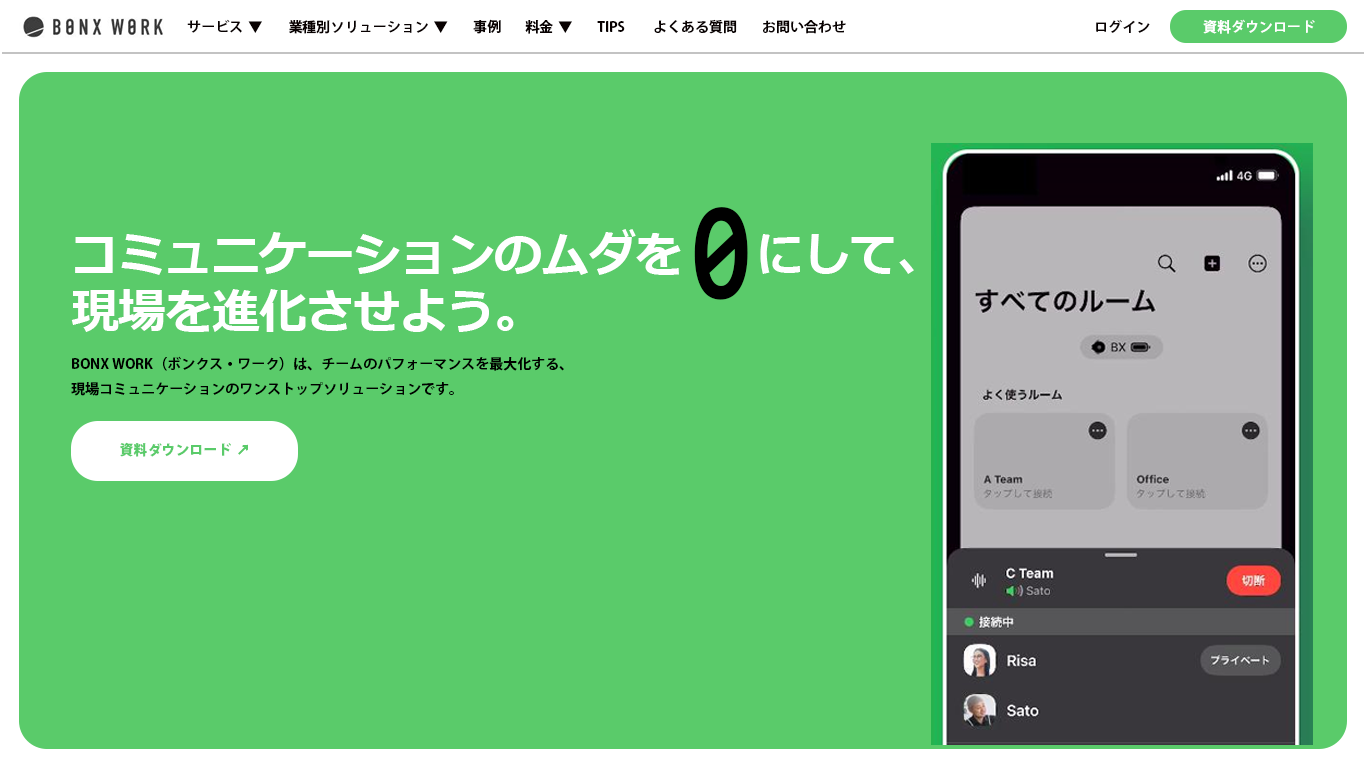
<style>
.page{position:relative;width:1366px;height:768px;background:#5acb6a}
.page>*{position:absolute;margin:0}
.t1{font:14px "KozGoPr6N-Bold";letter-spacing:-0.015em;color:#080101}
.t2{font:14px "KozGoPr6N-Bold";letter-spacing:-0.015em;color:#ffffff}
.t3{font:140px "Consolas-Bold";letter-spacing:-0.015em;color:#000000;scale:0.76 1}
.t4{font:48px "Meiryo-Bold";letter-spacing:-0.015em;color:#ffffff}
.t5{font:14px/25px "KozGoPr6N-Bold";letter-spacing:0.01em;color:#000000}
.t6{font:14px "KozGoPr6N-Heavy";letter-spacing:-0.015em;color:#5acb6a}
</style>
<div class="page">
<p class="t1" style="left:187px;top:19px;width:75px;height:14px">サービス▼</p>
<p class="t1" style="left:289px;top:20px;width:159px;height:14px">業種別ソリューション▼</p>
<p class="t1" style="left:473px;top:19px;width:28px;height:15px">事例</p>
<p class="t1" style="left:525px;top:20px;width:47px;height:14px">料金▼</p>
<p class="t1" style="left:597px;top:21px;width:28px;height:11px">TIPS</p>
<p class="t1" style="left:654px;top:19px;width:83px;height:15px">よくある質問</p>
<p class="t1" style="left:763px;top:20px;width:83px;height:14px">お問い合わせ</p>
<p class="t1" style="left:1096px;top:19px;width:54px;height:14px">ログイン</p>
<p class="t2" style="left:1203px;top:19px;width:112px;height:15px">資料ダウンロード</p>
<p class="t3" style="left:694px;top:207px;width:54px;height:93px">0</p>
<p class="t4" style="left:71px;top:229px;width:843px;height:103px">コミュニケーションのムダを　にして、<br>現場を進化させよう。</p>
<p class="t5" style="left:71px;top:356px;width:493px;height:40px">BONX WORK（ボンクス・ワーク）は、チームのパフォーマンスを最大化する、<br>現場コミュニケーションのワンストップソリューションです。</p>
<p class="t6" style="left:120px;top:442px;width:128px;height:15px">資料ダウンロード↗</p>
</div>
